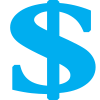
<style>
.page{position:relative;width:100px;height:100px;background:#ffffff}
.page>*{position:absolute;margin:0}
.t1{font:128.8px "TimesNewRomanPS-BoldMT";color:#00aeef;font-weight:bold;scale:1.47 1}
</style>
<div class="page">
<p class="t1" style="left:10px;top:0px;width:86px;height:101px">$</p>
</div>
